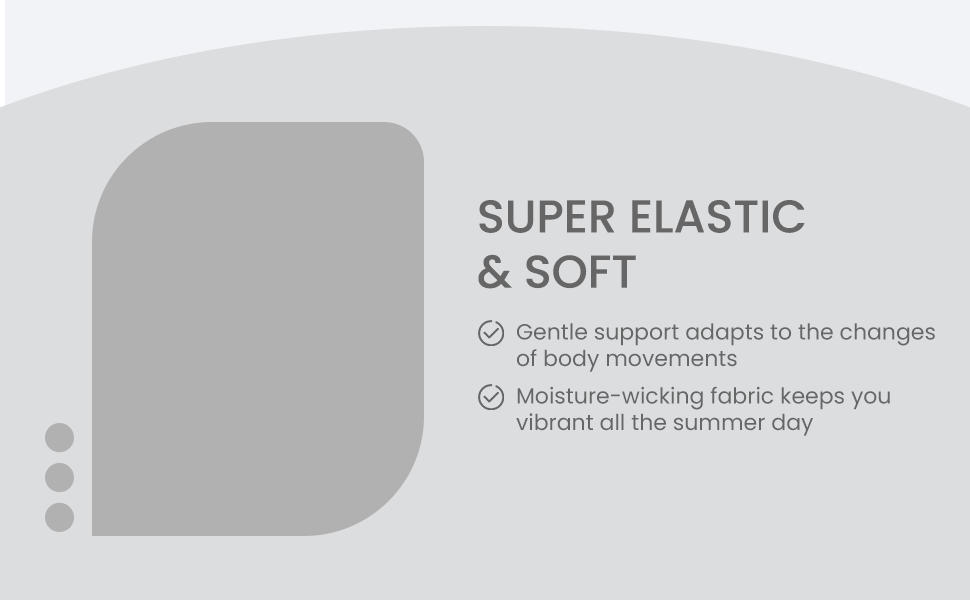
<style>
.page{position:relative;width:970px;height:600px;background:#dcdddf}
.page>*{position:absolute;margin:0}
.t1{font:46px "Poppins-Medium";color:#666666}
.t2{font:22px "Poppins-Regular";color:#666666}
</style>
<div class="page">
<p class="t1" style="left:478px;top:200px;width:327px;height:89px">SUPER ELASTIC<br>&amp; SOFT</p>
<p class="t2" style="left:517px;top:323px;width:418px;height:49px">Gentle support adapts to the changes<br>of body movements</p>
<p class="t2" style="left:516px;top:386px;width:374px;height:50px">Moisture-wicking fabric keeps you<br>vibrant all the summer day</p>
</div>
